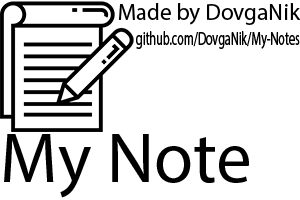
<style>
.page{position:relative;width:300px;height:200px;background:#ffffff}
.page>*{position:absolute;margin:0}
.t1{font:23.1px "MyriadPro-Regular";color:#000000}
.t2{font:19.2px "MyriadPro-Regular";color:#000000;scale:0.63 1}
.t3{font:71.4px "MyriadPro-Regular";color:#000000}
</style>
<div class="page">
<p class="t1" style="left:118px;top:3px;width:183px;height:22px">Made by DovgaNik</p>
<p class="t2" style="left:136px;top:31px;width:164px;height:18px">github.com/DovgaNik/My-Notes</p>
<p class="t3" style="left:4px;top:134px;width:245px;height:64px">My Note</p>
</div>
